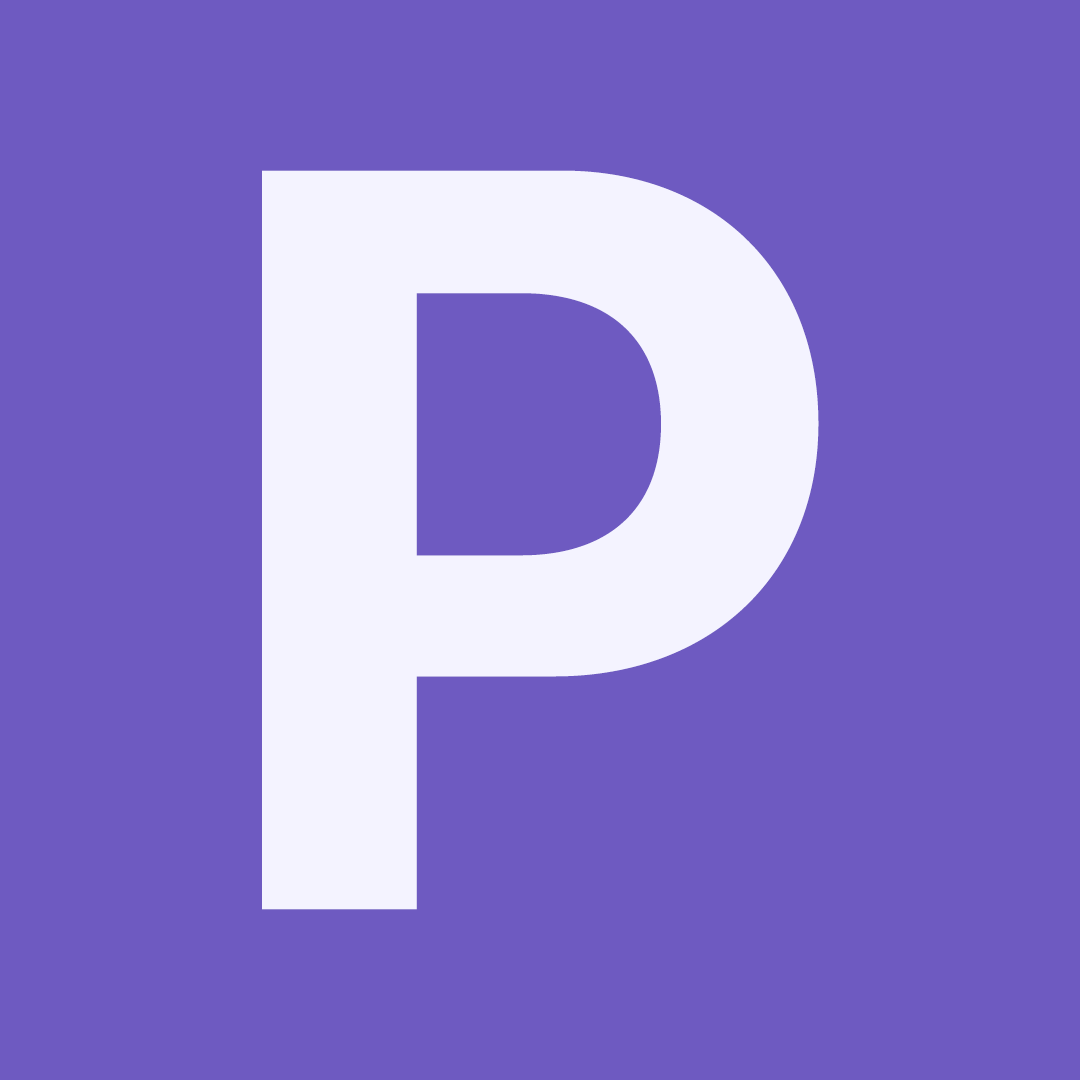
<style>
.page{position:relative;width:1080px;height:1080px;background:#6e5ac1}
.page>*{position:absolute;margin:0}
.t1{font:1047.8px "SFProDisplay-Bold";color:#f4f3ff}
</style>
<div class="page">
<p class="t1" style="left:262px;top:170px;width:557px;height:740px">P</p>
</div>
